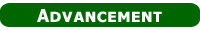
<style>
.page{position:relative;width:200px;height:30px;background:#006600}
.page>*{position:absolute;margin:0}
.t1{font:17.9px "TahomaSmallCap-Bold";color:#ffffff}
</style>
<div class="page">
<p class="t1" style="left:37px;top:9px;width:125px;height:14px">Advancement</p>
</div>
